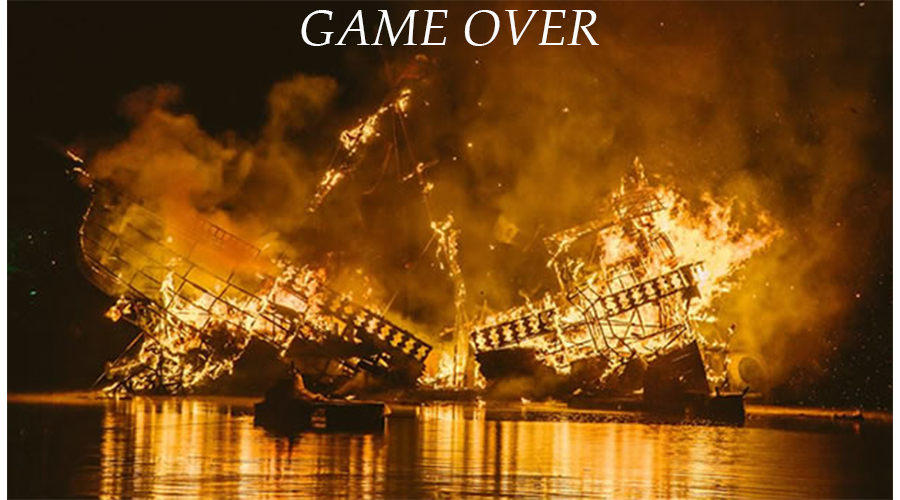
<style>
.page{position:relative;width:900px;height:500px}
.page>*{position:absolute;margin:0}
.t1{font:12px "Palatino-Italic";color:#fcfbfb}
</style>
<div class="page">
<p class="t1" style="left:301px;top:10px;width:298px;height:36px">GAME OVER</p>
</div>
